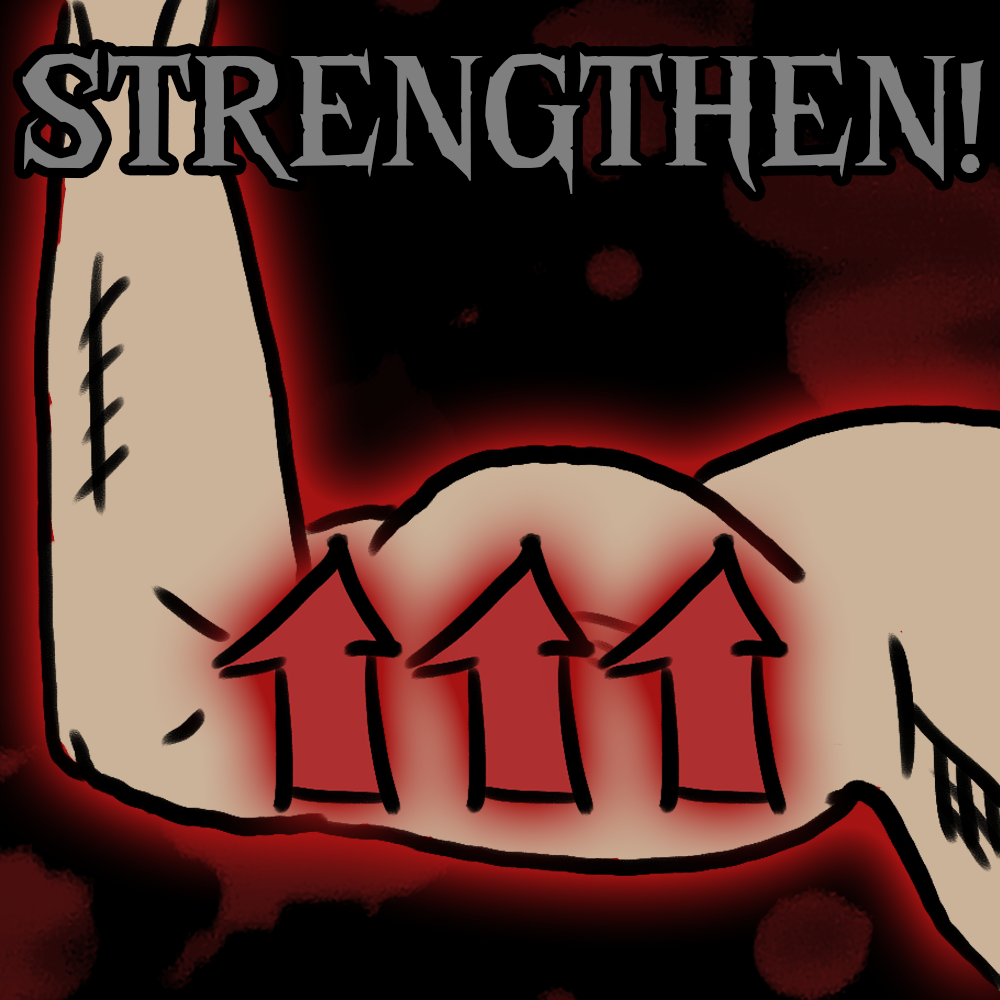
<style>
.page{position:relative;width:1000px;height:1000px;background:#000000}
.page>*{position:absolute;margin:0}
.t1{font:169.5px "KONSTANTINERegular";color:#7f7f7f}
</style>
<div class="page">
<p class="t1" style="left:22px;top:48px;width:962px;height:146px">STRENGTHEN!</p>
</div>
